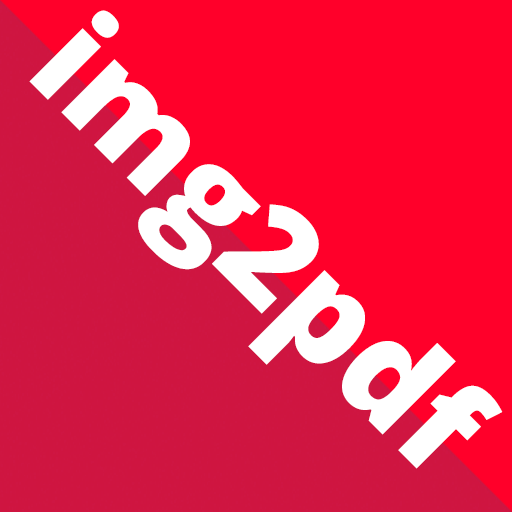
<style>
.page{position:relative;width:512px;height:512px;background:#ff002a}
.page>*{position:absolute;margin:0}
.t1{font:136px "OpenSans-ExtraBold";color:#ffffff}
</style>
<div class="page">
<p class="t1" style="left:29px;top:10px;width:474px;height:459px;rotate:45deg">img2pdf</p>
</div>
